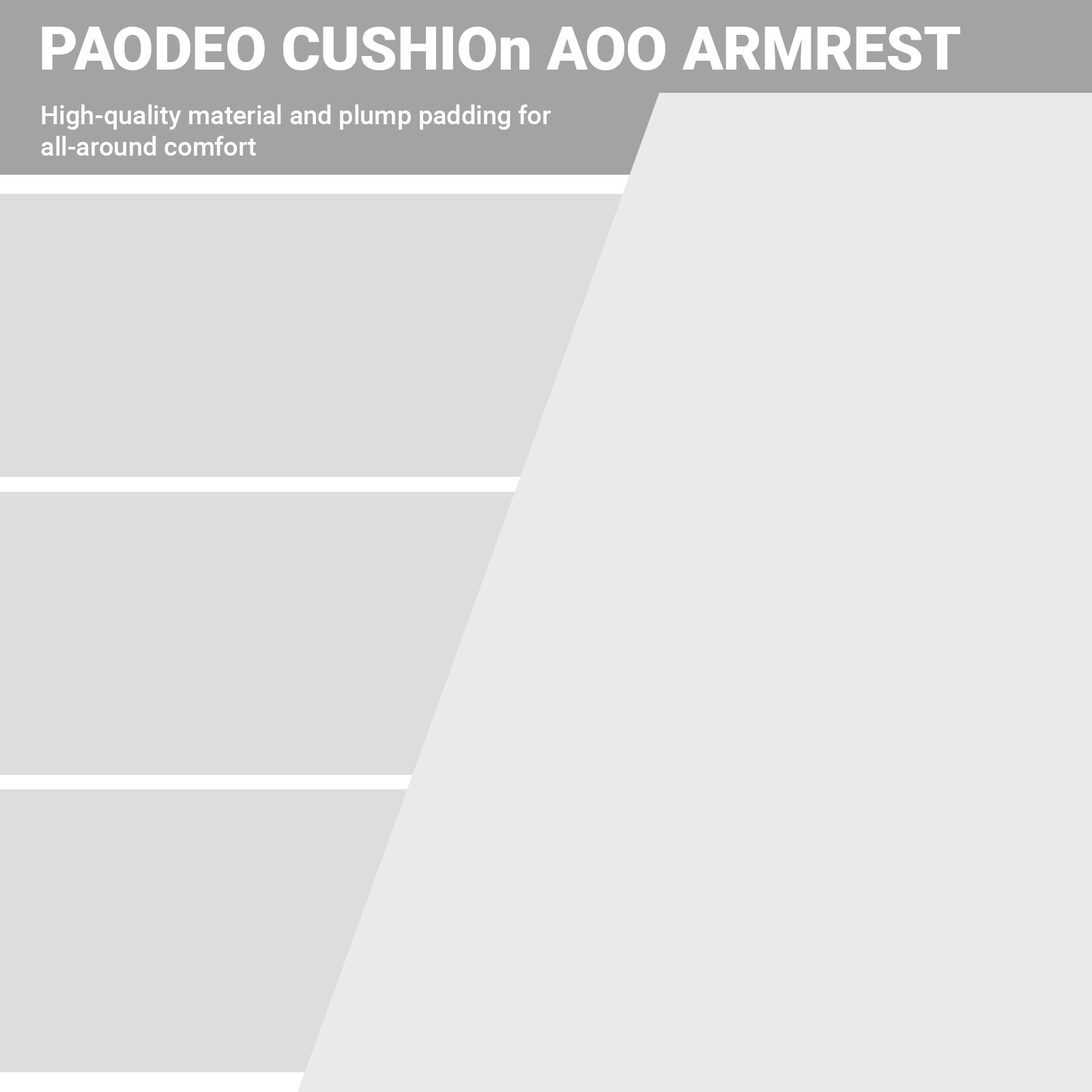
<style>
.page{position:relative;width:1092px;height:1092px;background:#e9eaeb}
.page>*{position:absolute;margin:0}
.t1{font:59.8px "Roboto-Black";color:#ffffff}
.t2{font:26.2px "Roboto-Medium";color:#ffffff}
</style>
<div class="page">
<p class="t1" style="left:42px;top:27px;width:918px;height:43px">PAODEO CUSHIOn AOO ARMREST</p>
<p class="t2" style="left:41px;top:104px;width:510px;height:52px">High-quality material and plump padding for<br>all-around comfort</p>
</div>
